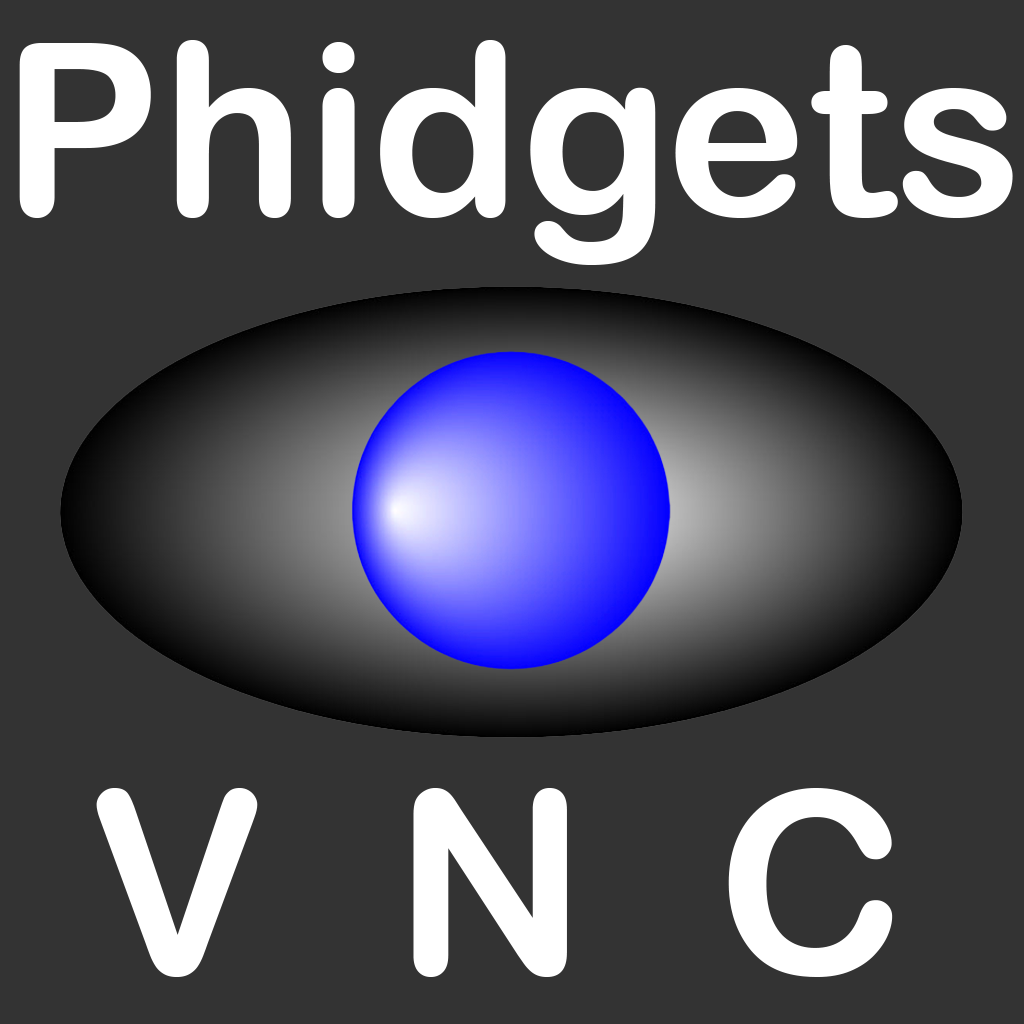
<style>
.page{position:relative;width:1024px;height:1024px;background:#333333}
.page>*{position:absolute;margin:0}
.t1{font:240px "ArialRoundedMTBold";color:#ffffff}
.t2{font:256px "ArialRoundedMTBold";color:#ffffff}
</style>
<div class="page">
<p class="t1" style="left:19px;top:40px;width:994px;height:225px">Phidgets</p>
<p class="t2" style="left:96px;top:788px;width:797px;height:189px">V  N  C</p>
</div>
